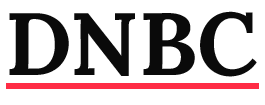
<style>
.page{position:relative;width:265px;height:105px;background:#ffffff}
.page>*{position:absolute;margin:0}
.t1{font:88.2px "Lora-Bold";color:#0a0a0a}
</style>
<div class="page">
<p class="t1" style="left:9px;top:11px;width:248px;height:66px">DNBC</p>
</div>
